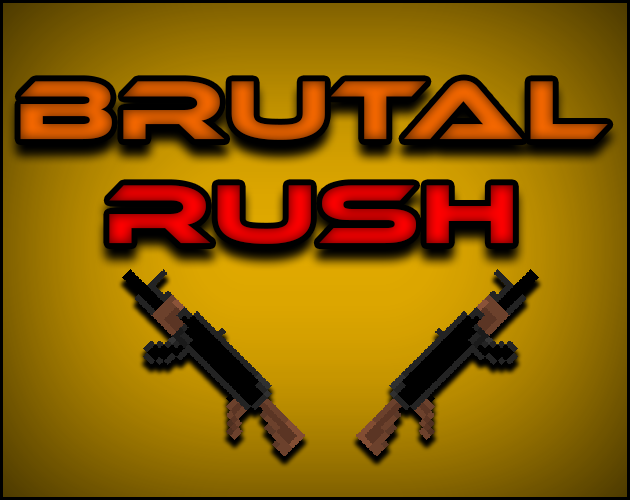
<style>
.page{position:relative;width:630px;height:500px}
.page>*{position:absolute;margin:0}
.t1{font:86.4px "EthnocentricRg-Regular";scale:1.23 1}
</style>
<div class="page">
<p class="t1" style="left:20px;top:80px;width:588px;height:164px;text-align:center">Brutal<br>Rush</p>
</div>
